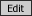
<style>
.page{position:relative;width:32px;height:16px;background:#cdcdcd}
.page>*{position:absolute;margin:0}
.t1{font:10px "Tahoma";color:#000000}
</style>
<div class="page">
<p class="t1" style="left:8px;top:4px;width:16px;height:8px">Edit</p>
</div>
